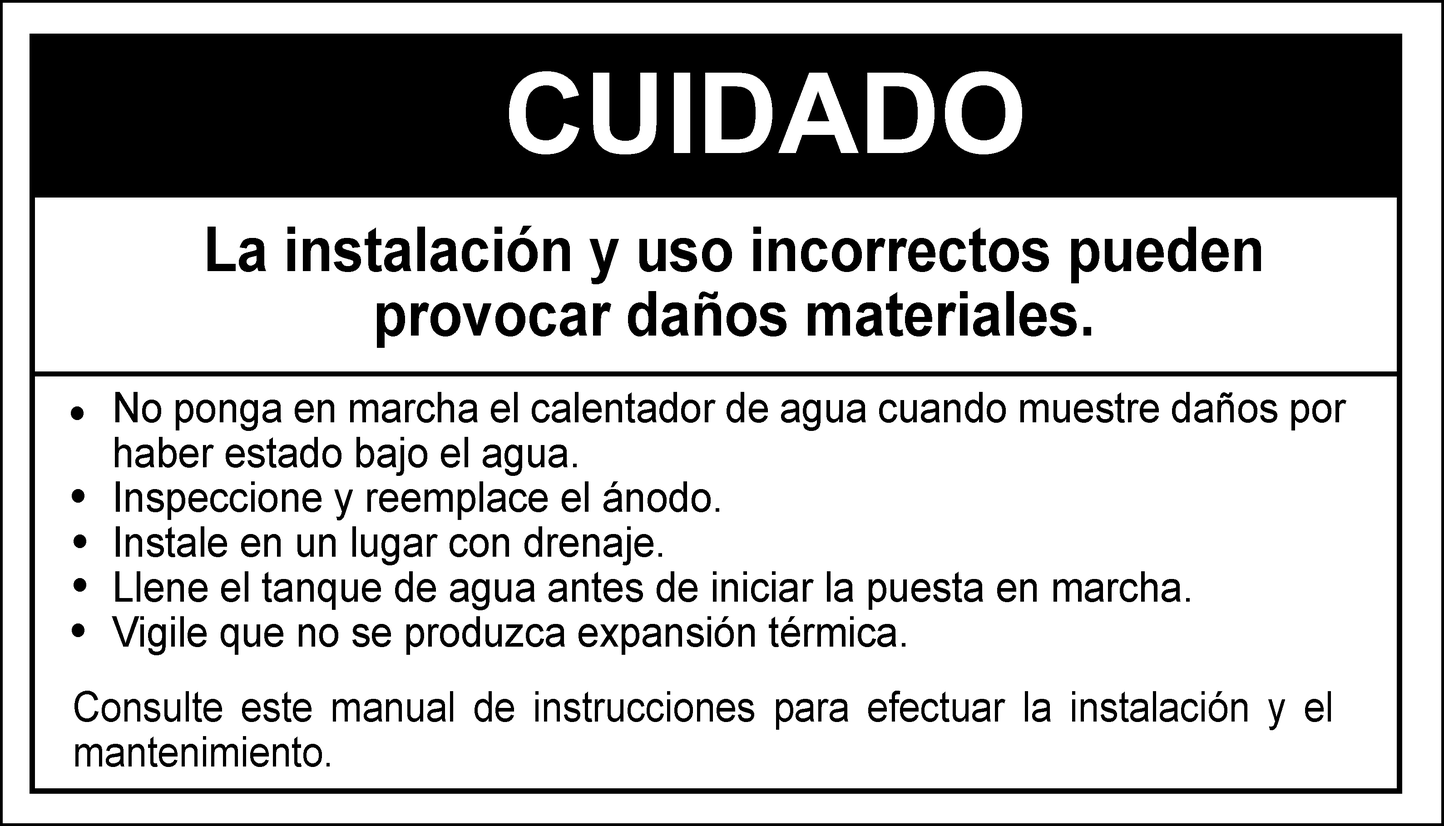
<style>
.page{position:relative;width:1444px;height:826px;background:#ffffff}
.page>*{position:absolute;margin:0}
.t1{font:112.1px "Arial-BoldMT";color:#ffffff}
.t2{font:61.7px/61.7px "Arial-BoldMT";color:#000000;scale:0.9 1}
.t3{font:61.7px/64.5px "Arial-BoldMT";color:#000000;scale:0.9 1}
.t4{font:42px/44.8px "ArialMT";color:#000000;scale:0.94 1}
.t5{font:56.1px "ArialMT";color:#000000;scale:0.94 1}
.t6{font:42px/44.8px "ArialMT";color:#000000;scale:0.91 1}
</style>
<div class="page">
<p class="t1" style="left:509px;top:71px;width:513px;height:83px">CUIDADO</p>
<p class="t2" style="left:207px;top:226px;width:1054px;height:122px;text-align:center"><span class="t3">La instalación y uso incorrectos pueden<br>provocar daños materiales.<br></span>• No ponga en marcha el calentador de agua cuando muestre daños por haber</p>
<p class="t4" style="left:112px;top:392px;width:1234px;height:263px;text-align:justify">No ponga en marcha el calentador de agua cuando muestre daños por haber estado bajo el agua.<br>Inspeccione y reemplace el ánodo.<br>Instale en un lugar con drenaje.<br>Llene el tanque de agua antes de iniciar la puesta en marcha.<br>Vigile que no se produzca expansión térmica.</p>
<p class="t5" style="left:71px;top:406px;width:13px;height:14px">•</p>
<p class="t5" style="left:72px;top:489px;width:12px;height:14px">•</p>
<p class="t5" style="left:74px;top:534px;width:12px;height:14px">•</p>
<p class="t5" style="left:74px;top:578px;width:12px;height:14px">•</p>
<p class="t5" style="left:72px;top:623px;width:12px;height:14px">•</p>
<p class="t6" style="left:74px;top:691px;width:1257px;height:76px;text-align:justify">Consulte este manual de instrucciones para efectuar la instalación y el mantenimiento.</p>
</div>
